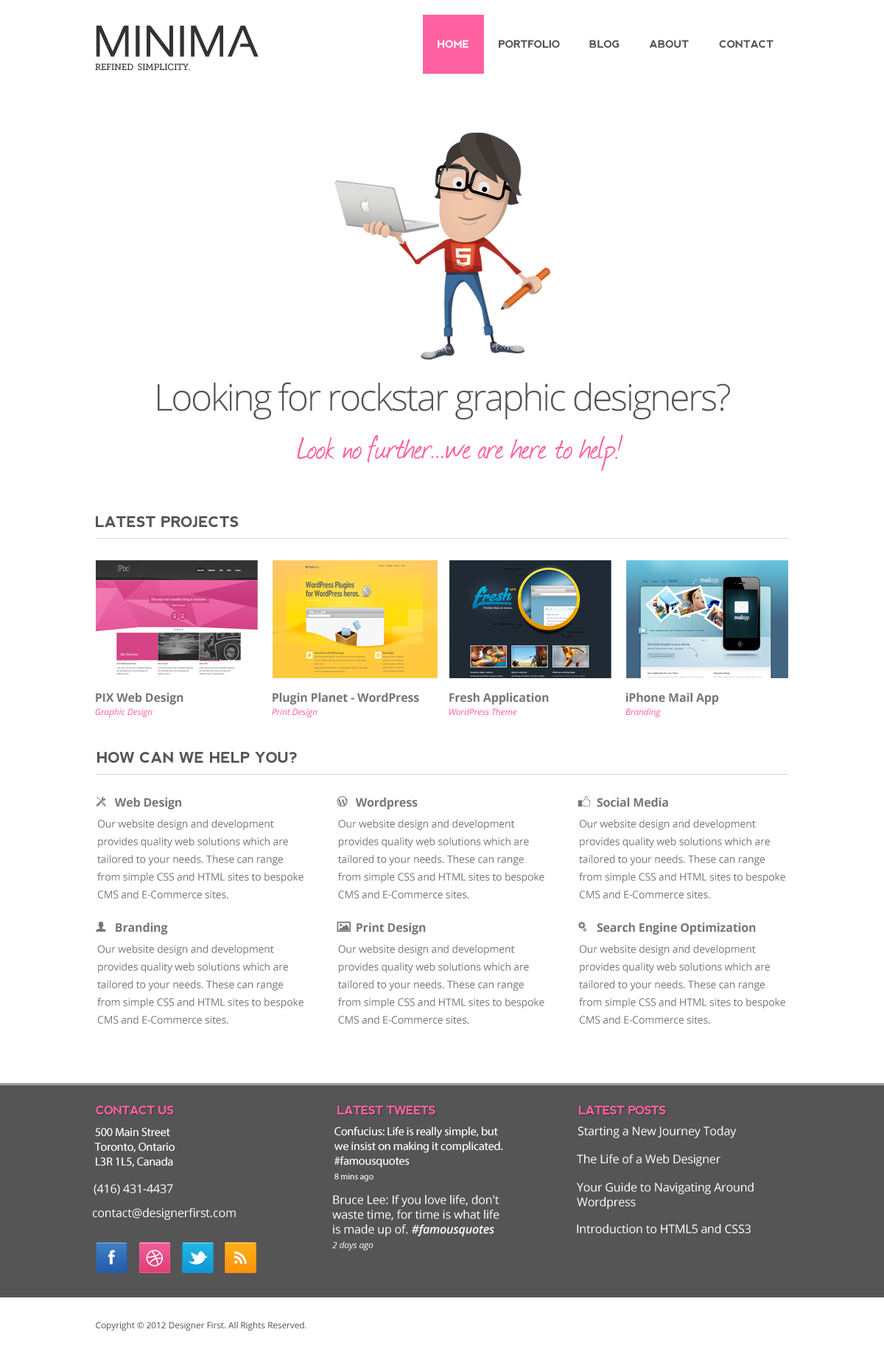
<style>
.page{position:relative;width:884px;height:1349px;background:#ffffff}
.page>*{position:absolute;margin:0}
.t1{font:44.2px "Sansation";letter-spacing:0.01em;color:#333333}
.t2{font:10.3px "nevis-Bold";letter-spacing:-0.01em;color:#ffffff}
.t3{font:10.3px "nevis-Bold";letter-spacing:-0.01em;color:#555555}
.t4{font:8.8px "MuseoSlab-500";letter-spacing:-0.025em;color:#333333}
.t5{font:36.8px "OpenSans-Light";letter-spacing:-0.05em;color:#555555}
.t6{font:36.8px "Journal";letter-spacing:-0.01em;color:#ff61a0}
.t7{font:14.7px "nevis-Bold";letter-spacing:-0.01em;color:#555555}
.t8{font:11.8px/13.3px "OpenSans-Bold";letter-spacing:-0.01em;color:#777777}
.t9{font:8.8px/13.3px "OpenSans-Italic";letter-spacing:-0.01em;color:#ff61a0}
.t10{font:11.8px "OpenSans-Bold";letter-spacing:-0.01em;color:#777777}
.t11{font:10.3px/17.7px "OpenSans";letter-spacing:-0.01em;color:#777777}
.t12{font:11.8px "nevis-Bold";letter-spacing:-0.05em;color:#ff61a0}
.t13{font:11.8px/14.7px "MyriadPro-Regular";letter-spacing:-0.01em;color:#ffffff}
.t14{font:8.8px/14.7px "MyriadPro-Regular";letter-spacing:-0.01em;color:#ffffff}
.t15{font:11.8px "OpenSans";letter-spacing:-0.01em;color:#ffffff}
.t16{font:11.8px/14.7px "OpenSans";letter-spacing:-0.01em;color:#ffffff}
.t17{font:11.8px/14.7px "OpenSans-SemiboldItalic";letter-spacing:-0.01em;color:#ffffff}
.t18{font:8.8px/14.7px "OpenSans-Italic";letter-spacing:-0.01em;color:#ffffff}
.t19{font:8.8px "OpenSans";letter-spacing:-0.01em;color:#555555}
</style>
<div class="page">
<p class="t1" style="left:96px;top:25px;width:163px;height:32px">MINIMA</p>
<p class="t2" style="left:438px;top:40px;width:31px;height:8px">HOME</p>
<p class="t3" style="left:499px;top:40px;width:61px;height:8px">PORTFOLIO</p>
<p class="t3" style="left:590px;top:40px;width:29px;height:8px">BLOG</p>
<p class="t3" style="left:649px;top:40px;width:40px;height:8px">ABOUT</p>
<p class="t3" style="left:719px;top:40px;width:55px;height:8px">CONTACT</p>
<p class="t4" style="left:95px;top:63px;width:95px;height:8px">REFINED  SIMPLICITY.</p>
<p class="t5" style="left:158px;top:382px;width:572px;height:37px">Looking for rockstar graphic designers?</p>
<p class="t6" style="left:297px;top:434px;width:326px;height:37px">Look no further...we are here to help!</p>
<p class="t7" style="left:96px;top:516px;width:143px;height:11px">LATEST PROJECTS</p>
<p class="t8" style="left:95px;top:692px;width:88px;height:25px">PIX Web Design<br><span class="t9">Graphic Design</span></p>
<p class="t8" style="left:272px;top:692px;width:147px;height:25px">Plugin Planet - WordPress<br><span class="t9">Print Design</span></p>
<p class="t8" style="left:450px;top:692px;width:99px;height:23px">Fresh Application<br><span class="t9">WordPress Theme</span></p>
<p class="t8" style="left:626px;top:692px;width:93px;height:25px">iPhone Mail App<br><span class="t9">Branding</span></p>
<p class="t7" style="left:97px;top:752px;width:200px;height:11px">HOW CAN WE HELP YOU?</p>
<p class="t10" style="left:114px;top:797px;width:67px;height:12px">Web Design</p>
<p class="t10" style="left:355px;top:797px;width:63px;height:12px">Wordpress</p>
<p class="t10" style="left:597px;top:797px;width:71px;height:10px">Social Media</p>
<p class="t11" style="left:97px;top:819px;width:207px;height:79px">Our website design and development <br>provides quality web solutions which are <br>tailored to your needs. These can range <br>from simple CSS and HTML sites to bespoke <br>CMS and E-Commerce sites.</p>
<p class="t11" style="left:338px;top:819px;width:207px;height:79px">Our website design and development <br>provides quality web solutions which are <br>tailored to your needs. These can range <br>from simple CSS and HTML sites to bespoke <br>CMS and E-Commerce sites.</p>
<p class="t11" style="left:579px;top:819px;width:207px;height:79px">Our website design and development <br>provides quality web solutions which are <br>tailored to your needs. These can range <br>from simple CSS and HTML sites to bespoke <br>CMS and E-Commerce sites.</p>
<p class="t10" style="left:116px;top:922px;width:52px;height:12px">Branding</p>
<p class="t10" style="left:357px;top:922px;width:69px;height:12px">Print Design</p>
<p class="t10" style="left:597px;top:922px;width:159px;height:12px">Search Engine Optimization</p>
<p class="t11" style="left:97px;top:944px;width:207px;height:80px">Our website design and development <br>provides quality web solutions which are <br>tailored to your needs. These can range <br>from simple CSS and HTML sites to bespoke <br>CMS and E-Commerce sites.</p>
<p class="t11" style="left:338px;top:944px;width:207px;height:80px">Our website design and development <br>provides quality web solutions which are <br>tailored to your needs. These can range <br>from simple CSS and HTML sites to bespoke <br>CMS and E-Commerce sites.</p>
<p class="t11" style="left:579px;top:944px;width:207px;height:80px">Our website design and development <br>provides quality web solutions which are <br>tailored to your needs. These can range <br>from simple CSS and HTML sites to bespoke <br>CMS and E-Commerce sites.</p>
<p class="t12" style="left:96px;top:1105px;width:78px;height:9px">CONTACT US</p>
<p class="t12" style="left:337px;top:1105px;width:99px;height:9px">LATEST TWEETS</p>
<p class="t12" style="left:579px;top:1105px;width:87px;height:9px">LATEST POSTS</p>
<p class="t13" style="left:94px;top:1127px;width:81px;height:39px">500 Main Street<br>Toronto, Ontario<br>L3R 1L5, Canada</p>
<p class="t13" style="left:335px;top:1126px;width:168px;height:55px">Confucius: Life is really simple, but <br>we insist on making it complicated. <br>#famousquotes<br><span class="t14">8 mins ago</span></p>
<p class="t15" style="left:578px;top:1125px;width:159px;height:13px">Starting a New Journey Today</p>
<p class="t15" style="left:577px;top:1153px;width:144px;height:13px">The Life of a Web Designer</p>
<p class="t16" style="left:577px;top:1182px;width:177px;height:26px">Your Guide to Navigating Around<br>Wordpress</p>
<p class="t15" style="left:94px;top:1183px;width:79px;height:11px">(416) 431-4437</p>
<p class="t16" style="left:332px;top:1194px;width:168px;height:56px">Bruce Lee: If you love life, don't <br>waste time, for time is what life <br>is made up of. <span class="t17">#famousquotes<br></span><span class="t18">2 days ago</span></p>
<p class="t15" style="left:93px;top:1207px;width:143px;height:13px">contact@designerfirst.com</p>
<p class="t15" style="left:577px;top:1223px;width:174px;height:10px">Introduction to HTML5 and CSS3</p>
<p class="t19" style="left:96px;top:1321px;width:211px;height:9px">Copyright © 2012 Designer First. All Rights Reserved.</p>
</div>
